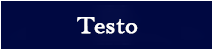
<style>
.page{position:relative;width:213px;height:50px;background:#000841}
.page>*{position:absolute;margin:0}
.t1{font:25px "BellMT";color:#ffffff;font-weight:bold}
</style>
<div class="page">
<p class="t1" style="left:77px;top:17px;width:61px;height:17px">Testo</p>
</div>
